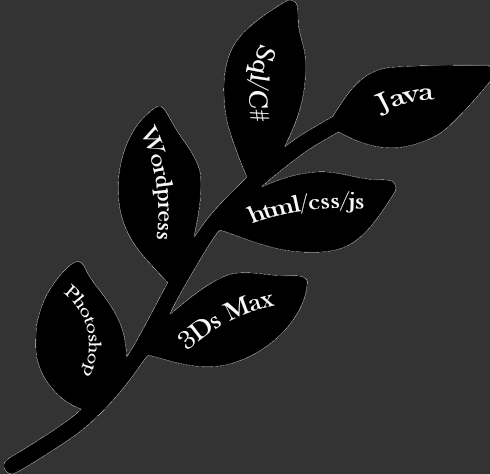
<style>
.page{position:relative;width:490px;height:474px;background:#333333}
.page>*{position:absolute;margin:0}
.t1{font:27.6px "BaskOldFace";color:#f9f9f9;scale:0.92 1}
.t2{font:27.1px "BaskOldFace";color:#f9f9f9;scale:1.11 1}
.t3{font:24px "BaskOldFace";color:#f9f9f9}
.t4{font:24px "BaskOldFace";color:#f9f9f9;scale:1.11 1}
.t5{font:26px "BaskOldFace";color:#f9f9f9}
</style>
<div class="page">
<p class="t1" style="left:245px;top:44px;width:30px;height:77px;rotate:96deg">Sql/C#</p>
<p class="t2" style="left:373px;top:88px;width:62px;height:28px;rotate:-14deg">Java</p>
<p class="t3" style="left:143px;top:123px;width:30px;height:116px;rotate:81deg">Wordpress</p>
<p class="t4" style="left:245px;top:191px;width:119px;height:32px;rotate:-7deg">html/css/js</p>
<p class="t5" style="left:178px;top:294px;width:97px;height:55px;rotate:-27deg">3Ds Max</p>
</div>
